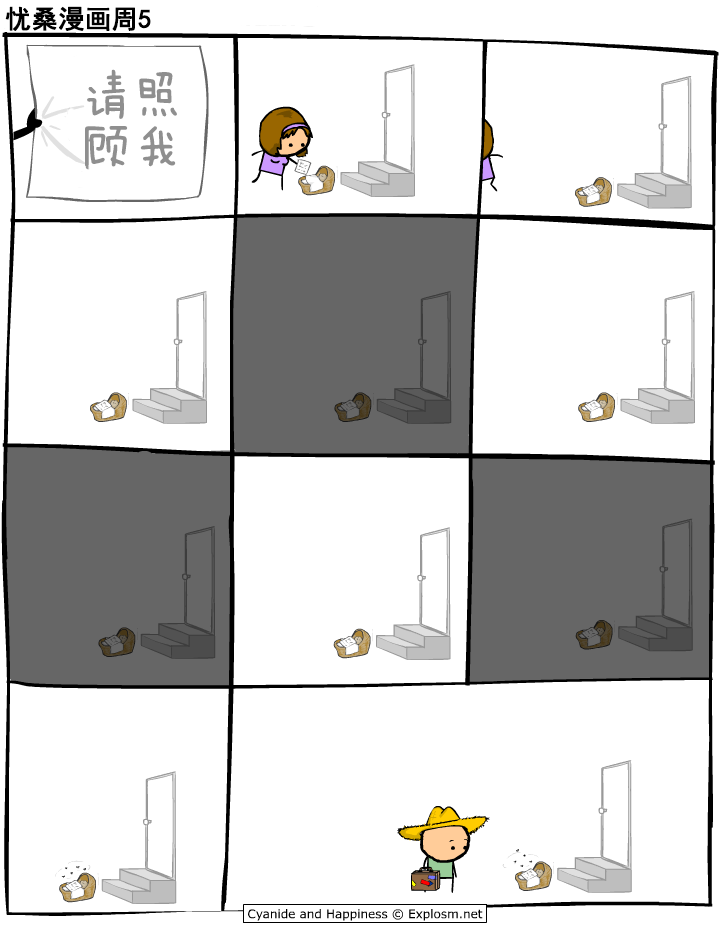
<style>
.page{position:relative;width:720px;height:925px;background:#ffffff}
.page>*{position:absolute;margin:0}
.t1{font:26px "SimHei";color:#000000;font-weight:bold}
.t2{font:52px/52px "FZMWJW--GB1-0";color:#8f8f8f}
</style>
<div class="page">
<p class="t1" style="left:5px;top:6px;width:146px;height:25px">忧桑漫画周5</p>
<p class="t2" style="left:85px;top:69px;width:92px;height:98px">请照<br>顾我</p>
</div>
